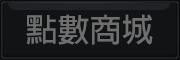
<style>
.page{position:relative;width:180px;height:60px;background:#121315}
.page>*{position:absolute;margin:0}
.t1{font:32px "AdobeFanHeitiStd-Bold";color:#6f6f6f}
</style>
<div class="page">
<p class="t1" style="left:26px;top:14px;width:127px;height:31px">點數商城</p>
</div>
